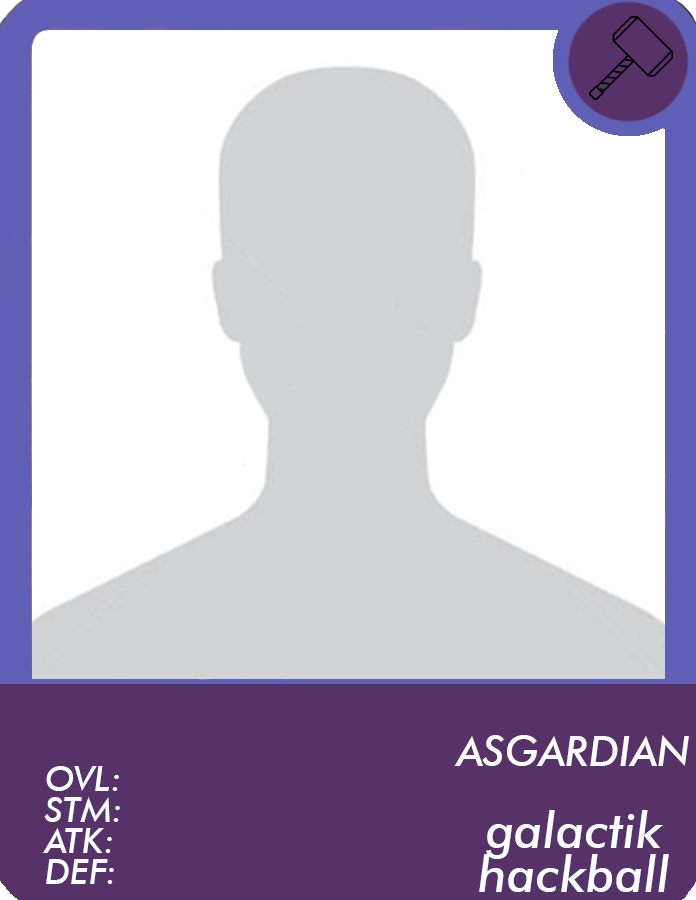
<style>
.page{position:relative;width:696px;height:900px;background:#ffffff}
.page>*{position:absolute;margin:0}
.t1{font:42px "FuturaBT-MediumItalic";color:#ffffff}
.t2{font:35px/31px "FuturaBT-MediumItalic";color:#ffffff}
.t3{font:50.3px/44.7px "FuturaBT-MediumItalic";color:#ffffff}
</style>
<div class="page">
<p class="t1" style="left:454px;top:735px;width:235px;height:31px">ASGARDIAN</p>
<p class="t2" style="left:43px;top:766px;width:77px;height:118px">OVL:<br>STM:<br>ATK:<br>DEF:</p>
<p class="t3" style="left:479px;top:810px;width:190px;height:82px;text-align:center">galactik<br>hackball</p>
</div>
